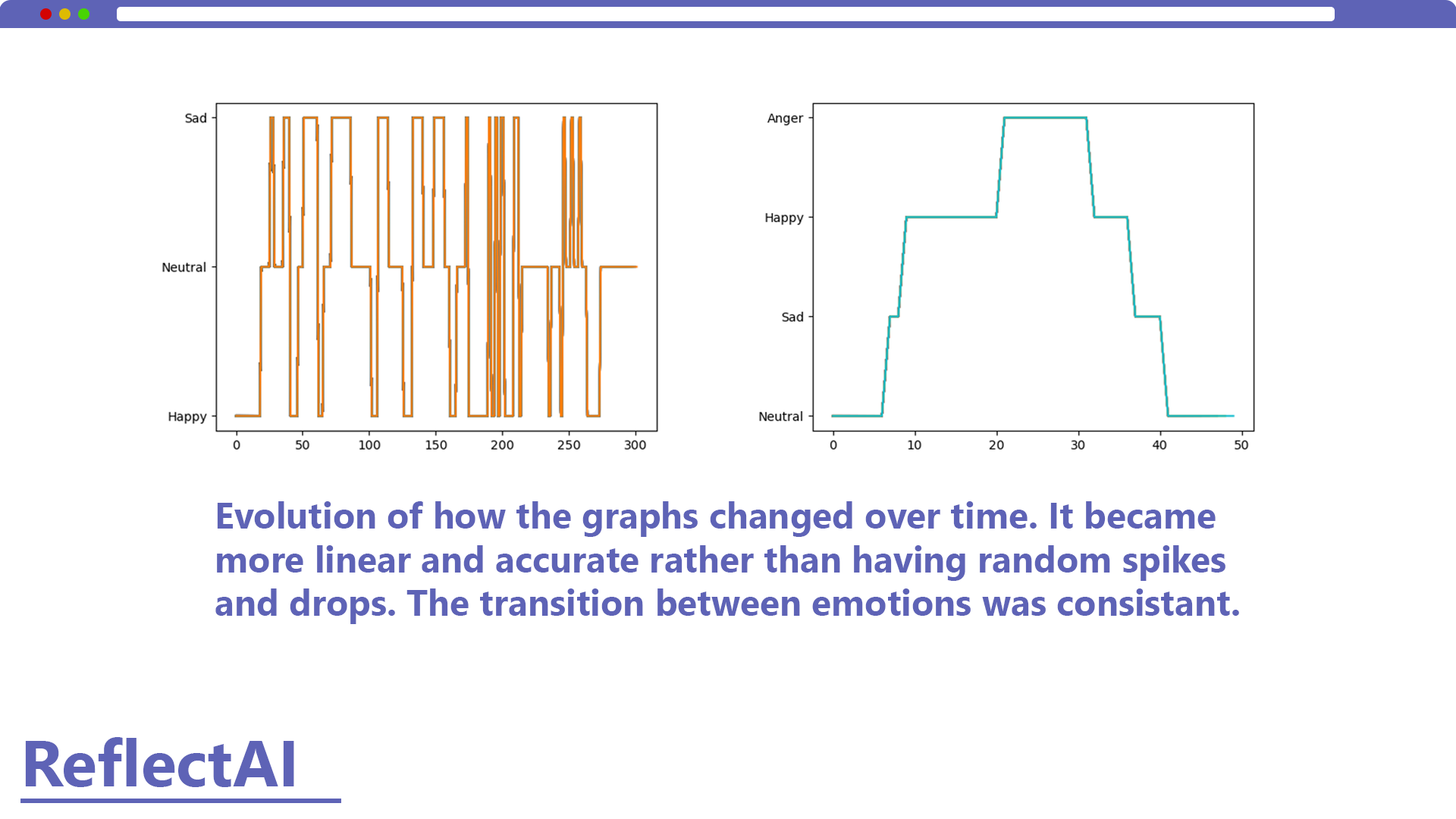
<style>
.page{position:relative;width:1456px;height:819px;background:#ffffff}
.page>*{position:absolute;margin:0}
.t1{font:36.4px "SegoeUI-Bold";color:#5e63b6}
.t2{font:65.2px "SegoeUI-Bold";color:#5e63b6}
</style>
<div class="page">
<p class="t1" style="left:215px;top:501px;width:1024px;height:123px">Evolution of how the graphs changed over time. It became more linear and accurate rather than having random spikes and drops. The transition between emotions was consistant.</p>
<p class="t2" style="left:25px;top:737px;width:269px;height:50px">ReflectAI</p>
</div>
